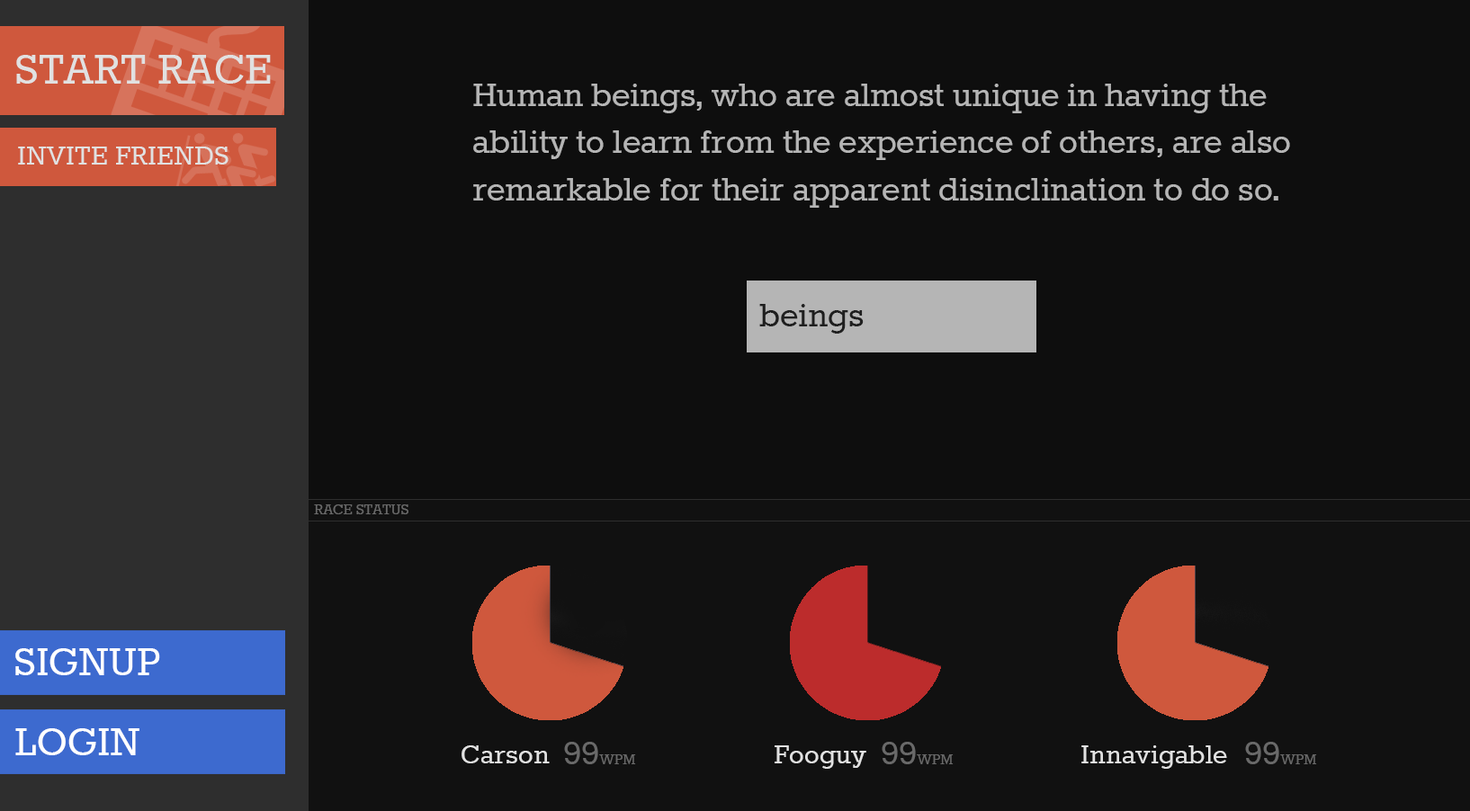
<style>
.page{position:relative;width:1470px;height:811px;background:#0e0e0e}
.page>*{position:absolute;margin:0}
.t1{font:50.6px "Rokkitt";color:#e1e1e1}
.t2{font:39.4px "Rokkitt";color:#b5b5b5}
.t3{font:31.9px "Rokkitt";color:#e1e1e1}
.t4{font:39.4px "Rokkitt";color:#1f1f1f}
.t5{font:16.9px "Rokkitt";color:#696969}
.t6{font:46.8px "Rokkitt";color:#ffffff}
.t7{font:39.4px "Rokkitt";color:#696969}
</style>
<div class="page">
<p class="t1" style="left:16px;top:55px;width:255px;height:29px">START RACE</p>
<p class="t2" style="left:473px;top:84px;width:817px;height:124px">Human beings, who are almost unique in having the ability to learn from the experience of others, are also remarkable for their apparent disinclination to do so.</p>
<p class="t3" style="left:18px;top:147px;width:210px;height:18px">INVITE FRIENDS</p>
<p class="t4" style="left:759px;top:304px;width:104px;height:30px">beings</p>
<p class="t5" style="left:314px;top:505px;width:94px;height:9px">RACE STATUS</p>
<p class="t6" style="left:15px;top:649px;width:145px;height:27px">SIGNUP</p>
<p class="t6" style="left:15px;top:729px;width:124px;height:27px">LOGIN</p>
<p class="t3" style="left:461px;top:746px;width:89px;height:18px">Carson</p>
<p class="t5" style="left:564px;top:742px;width:72px;height:23px"><span class="t7">99</span>WPM</p>
<p class="t3" style="left:774px;top:746px;width:92px;height:23px">Fooguy</p>
<p class="t5" style="left:881px;top:742px;width:72px;height:23px"><span class="t7">99</span>WPM</p>
<p class="t3" style="left:1081px;top:746px;width:146px;height:23px">Innavigable</p>
<p class="t5" style="left:1245px;top:742px;width:72px;height:23px"><span class="t7">99</span>WPM</p>
</div>
